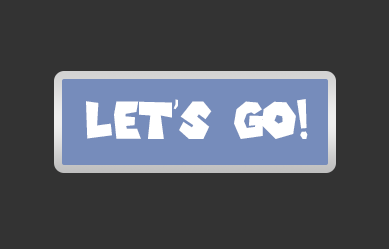
<style>
.page{position:relative;width:389px;height:249px;background:#333333}
.page>*{position:absolute;margin:0}
.t1{font:50.1px "SuperMarioGalaxy";color:#ffffff;scale:0.88 1}
</style>
<div class="page">
<p class="t1" style="left:86px;top:99px;width:222px;height:40px">Let’s go!</p>
</div>
